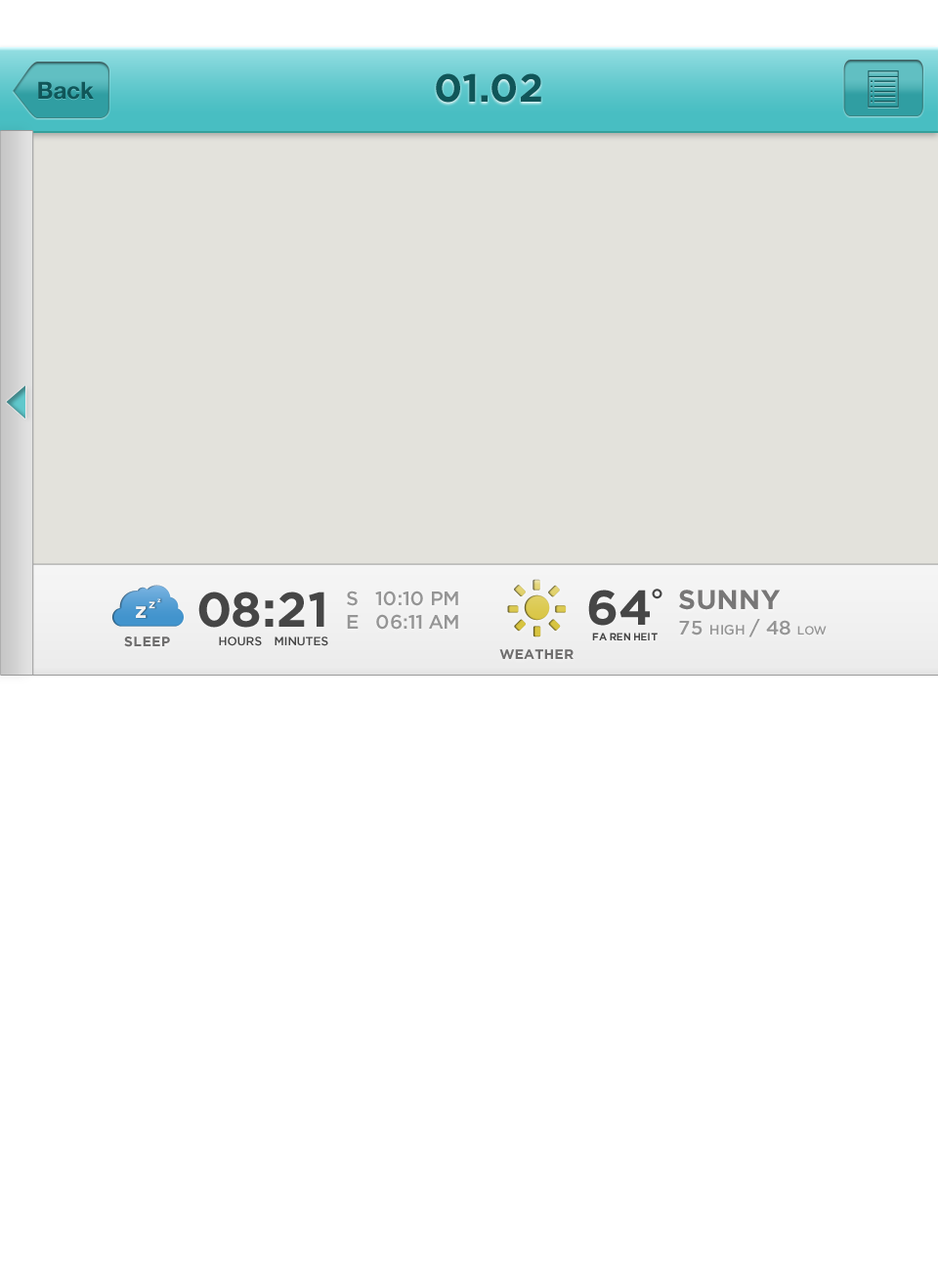
<style>
.page{position:relative;width:938px;height:1271px;background:#ffffff}
.page>*{position:absolute;margin:0}
.t1{font:39.1px "Gotham-Bold";color:#105659}
.t2{font:23.5px "HelveticaNeue-Bold";color:#105659}
.t3{font:48.9px "Gotham-Bold";color:#464646}
.t4{font:19.5px "Gotham-Medium";color:#959595}
.t5{font:17.6px "Gotham-Bold";letter-spacing:0.05em;color:#464646;text-transform:uppercase}
.t6{font:48.9px "Gotham-Bold";letter-spacing:0.05em;color:#464646;text-transform:uppercase}
.t7{font:27.4px "Gotham-Bold";color:#787777}
.t8{font:13.7px "Gotham-Medium";color:#959595}
.t9{font:11.7px "Gotham-Medium";color:#959595}
.t10{font:13.7px "Gotham-Bold";color:#6f6e6e}
.t11{font:11.7px "Gotham-Medium";color:#464646}
</style>
<div class="page">
<p class="t1" style="left:436px;top:73px;width:106px;height:30px">01.02</p>
<p class="t2" style="left:38px;top:81px;width:56px;height:19px">Back</p>
<p class="t3" style="left:198px;top:591px;width:127px;height:37px">08:21</p>
<p class="t4" style="left:347px;top:590px;width:111px;height:39px">S   10:10 PM<br>E   06:11 AM</p>
<p class="t5" style="left:588px;top:588px;width:75px;height:52px;text-align:center"><span class="t3">64</span><span class="t6">°<br></span>FARENHEIT</p>
<p class="t7" style="left:679px;top:589px;width:102px;height:21px">SUNNY</p>
<p class="t8" style="left:679px;top:619px;width:148px;height:18px"><span class="t4">75 </span>HIGH <span class="t4">/ 48 </span><span class="t9">LOW</span></p>
<p class="t10" style="left:124px;top:636px;width:46px;height:11px">SLEEP</p>
<p class="t11" style="left:219px;top:636px;width:43px;height:10px">HOURS</p>
<p class="t11" style="left:275px;top:636px;width:53px;height:10px">MINUTES</p>
<p class="t10" style="left:499px;top:649px;width:75px;height:10px">WEATHER</p>
</div>
